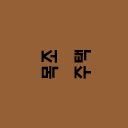
<style>
.page{position:relative;width:128px;height:128px;background:#956036}
.page>*{position:absolute;margin:0}
.t1{font:18.7px "HaanYHeadM";color:#000000}
</style>
<div class="page">
<p class="t1" style="left:41px;top:50px;width:50px;height:29px;rotate:-90deg">목조<br>주택</p>
</div>
